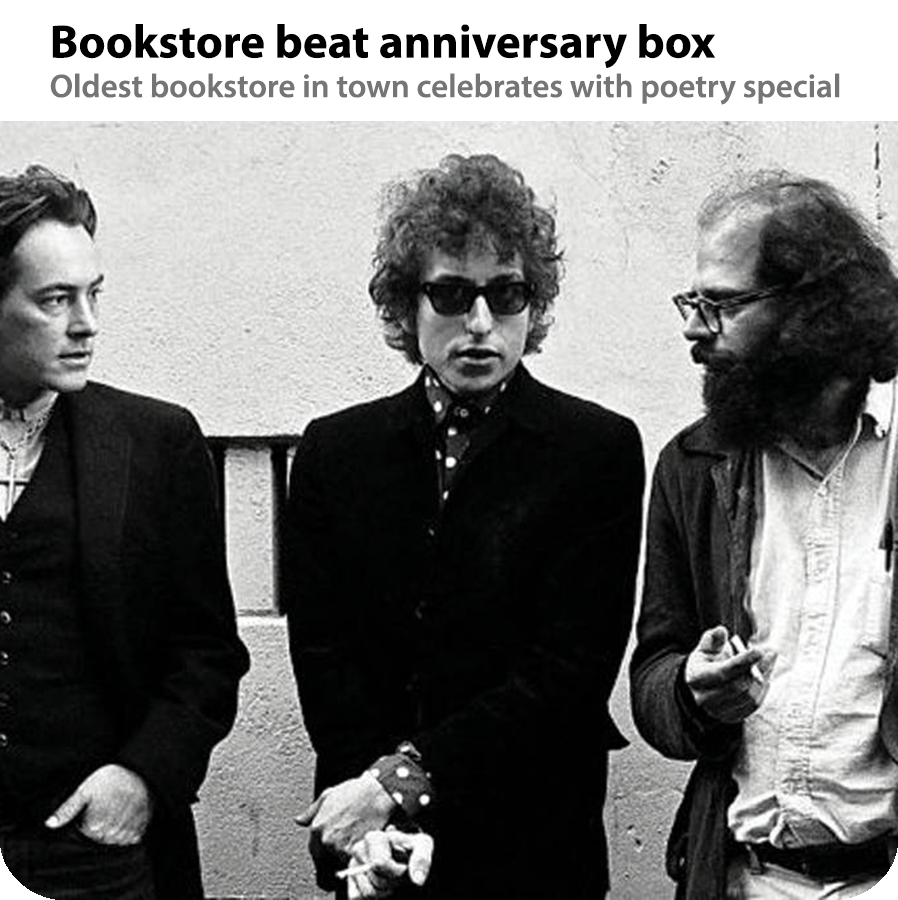
<style>
.page{position:relative;width:898px;height:900px}
.page>*{position:absolute;margin:0}
.t1{font:33px "MyriadPro-Semibold";color:#757575}
.t2{font:47px "MyriadPro-Bold";color:#000000}
</style>
<div class="page">
<p class="t1" style="left:50px;top:24px;width:790px;height:81px"><span class="t2">Bookstore beat anniversary box<br></span>Oldest bookstore in town celebrates with poetry special</p>
</div>
